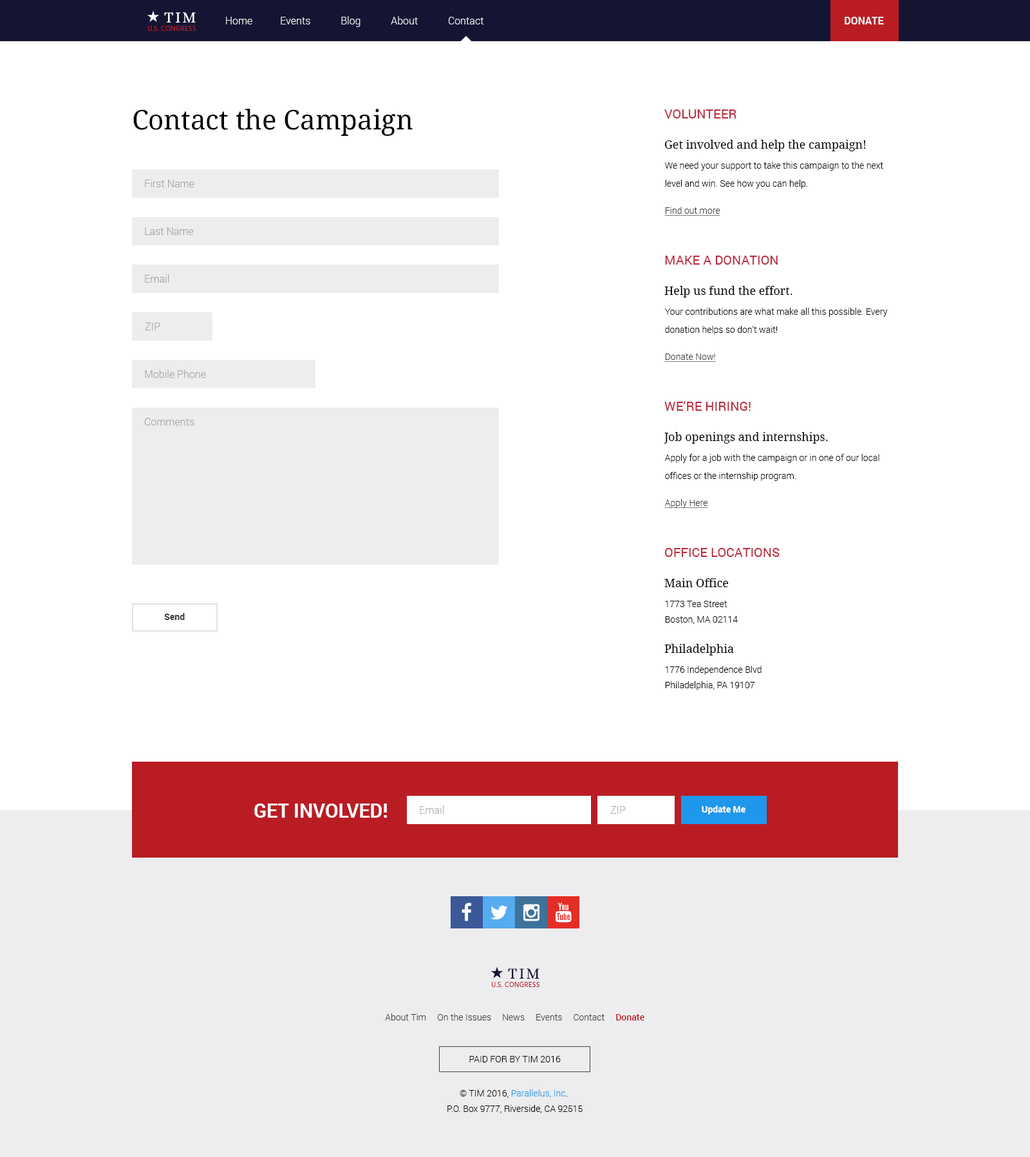
<style>
.page{position:relative;width:1030px;height:1157px;background:#ffffff}
.page>*{position:absolute;margin:0}
.t1{font:15.9px "Alice-Regular";letter-spacing:0.1em;color:#ffffff;text-transform:uppercase}
.t2{font:10.3px "Roboto-Light";color:#ededef}
.t3{font:10.3px "Roboto-Bold";color:#ededef}
.t4{font:7.1px "Hind-Regular";letter-spacing:0.03em;color:#ba1c24;text-transform:uppercase}
.t5{font:27px "DroidSerif";color:#000000}
.t6{font:12.9px "Roboto-Regular";color:#ba2b3e;text-transform:uppercase}
.t7{font:11.6px "DroidSerif";color:#000000}
.t8{font:9px/18px "Roboto-Light";color:#000000}
.t9{font:10.3px "Roboto-Light";color:#a5a4a5}
.t10{font:9px "Roboto-Light";color:#403d3d;text-decoration:underline}
.t11{font:9px/15.5px "Roboto-Light";color:#000000}
.t12{font:9px "Roboto-Bold";color:#403d3d}
.t13{font:19.3px "Roboto-Bold";color:#ffffff;text-transform:uppercase}
.t14{font:10.3px "Roboto-Light";color:#b0afaf}
.t15{font:9px "Roboto-Bold";color:#fefefe}
.t16{font:15.9px "Alice-Regular";letter-spacing:0.1em;color:#141433;text-transform:uppercase}
.t17{font:9px "Roboto-Light";color:#403d3d}
.t18{font:9px "Roboto-Medium";color:#ba1c24}
.t19{font:9.1px "Roboto-Light";color:#000000}
.t20{font:9.1px/15.5px "Roboto-Light";color:#000000}
.t21{font:9.1px/15.5px "Roboto-Light";color:#1f97ed}
</style>
<div class="page">
<p class="t1" style="left:164px;top:12px;width:32px;height:11px">Tim</p>
<p class="t2" style="left:226px;top:16px;width:258px;height:11px">Home           Events            Blog            About            Contact</p>
<p class="t3" style="left:845px;top:17px;width:39px;height:7px">DONATE</p>
<p class="t4" style="left:148px;top:26px;width:48px;height:5px">U.S. Congress</p>
<p class="t5" style="left:133px;top:109px;width:280px;height:27px">Contact the Campaign</p>
<p class="t6" style="left:665px;top:109px;width:72px;height:9px">Volunteer</p>
<p class="t7" style="left:665px;top:140px;width:201px;height:11px">Get involved and help the campaign!</p>
<p class="t8" style="left:665px;top:162px;width:219px;height:27px">We need your support to take this campaign to the next level and win. See how you can help.</p>
<p class="t9" style="left:145px;top:179px;width:49px;height:8px">First Name</p>
<p class="t10" style="left:665px;top:207px;width:56px;height:9px">Find out more</p>
<p class="t9" style="left:145px;top:227px;width:49px;height:8px">Last Name</p>
<p class="t6" style="left:665px;top:256px;width:113px;height:9px">Make a Donation</p>
<p class="t9" style="left:145px;top:274px;width:24px;height:9px">Email</p>
<p class="t7" style="left:665px;top:286px;width:128px;height:12px">Help us fund the effort.</p>
<p class="t8" style="left:665px;top:308px;width:223px;height:27px">Your contributions are what make all this possible. Every donation helps so don’t wait!</p>
<p class="t9" style="left:145px;top:323px;width:15px;height:7px">ZIP</p>
<p class="t10" style="left:665px;top:354px;width:51px;height:8px">Donate Now!</p>
<p class="t9" style="left:145px;top:370px;width:61px;height:8px">Mobile Phone</p>
<p class="t6" style="left:665px;top:401px;width:86px;height:10px">We’re Hiring!</p>
<p class="t9" style="left:144px;top:418px;width:50px;height:8px">Comments</p>
<p class="t7" style="left:664px;top:432px;width:164px;height:12px">Job openings and internships.</p>
<p class="t8" style="left:665px;top:454px;width:215px;height:27px">Apply for a job with the campaign or in one of our local offices or the internship program.</p>
<p class="t10" style="left:665px;top:499px;width:43px;height:9px">Apply Here</p>
<p class="t6" style="left:665px;top:548px;width:115px;height:9px">Office Locations</p>
<p class="t7" style="left:665px;top:578px;width:64px;height:9px">Main Office</p>
<p class="t11" style="left:665px;top:601px;width:73px;height:23px">1773 Tea Street<br>Boston, MA 02114</p>
<p class="t12" style="left:164px;top:613px;width:21px;height:7px">Send</p>
<p class="t7" style="left:665px;top:644px;width:69px;height:12px">Philadelphia</p>
<p class="t11" style="left:665px;top:666px;width:97px;height:24px">1776 Independence Blvd<br>Philadelphia, PA 19107</p>
<p class="t13" style="left:254px;top:804px;width:133px;height:14px">Get Involved!</p>
<p class="t14" style="left:420px;top:806px;width:24px;height:8px">Email</p>
<p class="t14" style="left:611px;top:806px;width:15px;height:8px">ZIP</p>
<p class="t15" style="left:702px;top:806px;width:44px;height:9px">Update Me</p>
<p class="t16" style="left:508px;top:969px;width:32px;height:11px">Tim</p>
<p class="t4" style="left:492px;top:982px;width:48px;height:5px">U.S. Congress</p>
<p class="t17" style="left:385px;top:1014px;width:260px;height:7px">About Tim     On the Issues     News     Events     Contact     <span class="t18">Donate</span></p>
<p class="t19" style="left:469px;top:1056px;width:92px;height:7px">PAID FOR BY TIM 2016</p>
<p class="t20" style="left:448px;top:1090px;width:135px;height:23px;text-align:center">© TIM 2016, <span class="t21">Parallelus, Inc</span>. <br>P.O. Box 9777, Riverside, CA 92515</p>
</div>
